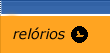
<style>
.page{position:relative;width:110px;height:53px;background:#ffa421}
.page>*{position:absolute;margin:0}
.t1{font:14px "Verdana-Italic";color:#000000}
</style>
<div class="page">
<p class="t1" style="left:13px;top:27px;width:52px;height:13px">relórios</p>
</div>
